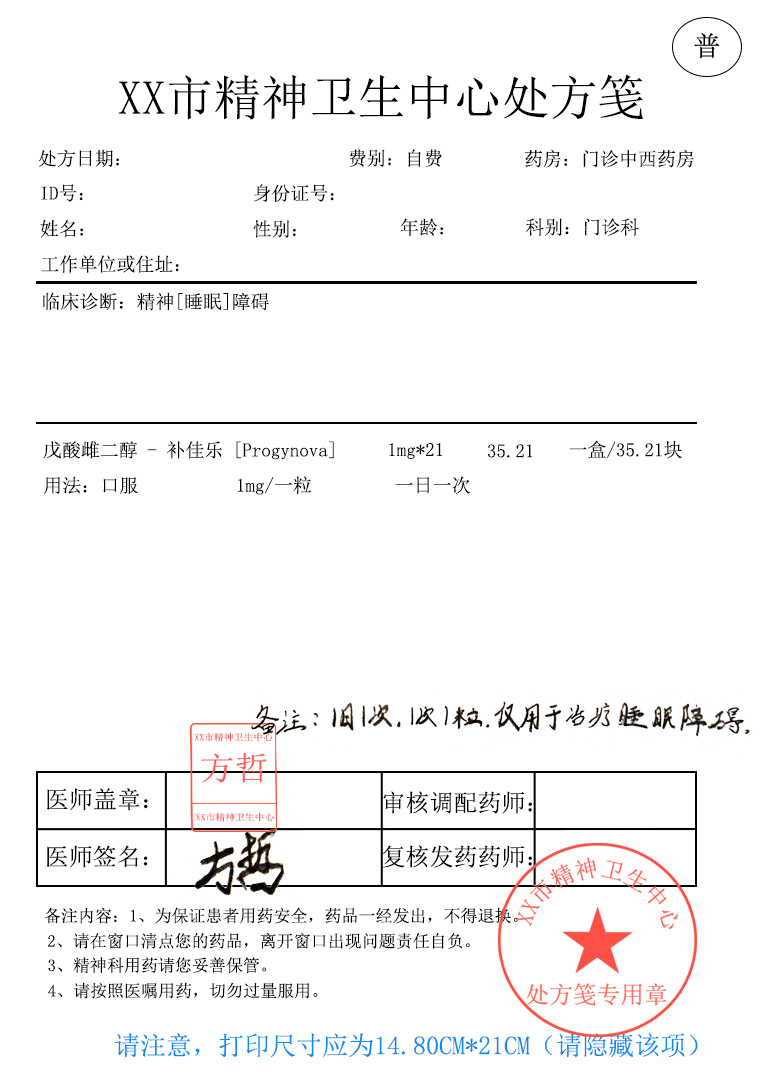
<style>
.page{position:relative;width:762px;height:1080px;background:#ffffff}
.page>*{position:absolute;margin:0}
.t1{font:48px "SimSun";color:#000000}
.t2{font:19px "SimSun";color:#000000}
.t3{font:24px "SimSun";color:#000000}
.t4{font:17px "SimSun";color:#000000}
.t5{font:26px "SimSun";color:#0d8af4}
</style>
<div class="page">
<p class="t1" style="left:118px;top:74px;width:526px;height:46px">XX市精神卫生中心处方笺</p>
<p class="t2" style="left:38px;top:149px;width:81px;height:19px">处方日期：</p>
<p class="t2" style="left:349px;top:149px;width:93px;height:18px">费别：自费</p>
<p class="t2" style="left:524px;top:149px;width:170px;height:19px">药房：门诊中西药房</p>
<p class="t2" style="left:41px;top:184px;width:42px;height:18px">ID号：</p>
<p class="t2" style="left:253px;top:184px;width:81px;height:18px">身份证号：</p>
<p class="t2" style="left:40px;top:219px;width:43px;height:19px">姓名：</p>
<p class="t2" style="left:253px;top:220px;width:43px;height:18px">性别：</p>
<p class="t2" style="left:400px;top:218px;width:44px;height:19px">年龄：</p>
<p class="t2" style="left:526px;top:218px;width:113px;height:18px">科别：门诊科</p>
<p class="t2" style="left:41px;top:255px;width:138px;height:18px">工作单位或住址：</p>
<p class="t2" style="left:43px;top:292px;width:226px;height:19px">临床诊断：精神[睡眠]障碍</p>
<p class="t2" style="left:43px;top:441px;width:291px;height:19px">戊酸雌二醇 - 补佳乐 [Progynova]</p>
<p class="t2" style="left:389px;top:443px;width:54px;height:16px">1mg*21</p>
<p class="t2" style="left:488px;top:444px;width:45px;height:14px">35.21</p>
<p class="t2" style="left:569px;top:440px;width:113px;height:19px">一盒/35.21块</p>
<p class="t2" style="left:44px;top:476px;width:94px;height:18px">用法：口服</p>
<p class="t2" style="left:238px;top:476px;width:74px;height:19px">1mg/一粒</p>
<p class="t2" style="left:395px;top:476px;width:75px;height:18px">一日一次</p>
<p class="t3" style="left:47px;top:788px;width:101px;height:23px">医师盖章：</p>
<p class="t3" style="left:383px;top:791px;width:149px;height:23px">审核调配药师：</p>
<p class="t3" style="left:46px;top:845px;width:102px;height:23px">医师签名：</p>
<p class="t3" style="left:383px;top:845px;width:149px;height:23px">复核发药药师：</p>
<p class="t4" style="left:44px;top:907px;width:474px;height:17px">备注内容：1、为保证患者用药安全，药品一经发出，不得退换。</p>
<p class="t4" style="left:48px;top:932px;width:422px;height:17px">2、请在窗口清点您的药品，离开窗口出现问题责任自负。</p>
<p class="t4" style="left:48px;top:957px;width:219px;height:17px">3、精神科用药请您妥善保管。</p>
<p class="t4" style="left:48px;top:982px;width:270px;height:17px">4、请按照医嘱用药，切勿过量服用。</p>
<p class="t5" style="left:114px;top:1033px;width:584px;height:25px">请注意，打印尺寸应为14.80CM*21CM（请隐藏该项）</p>
</div>
